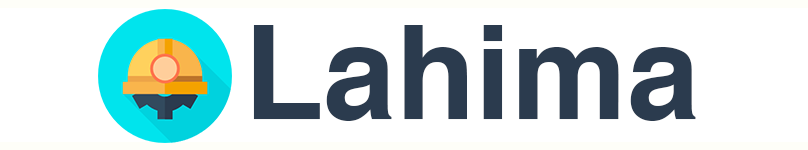
<style>
.page{position:relative;width:808px;height:150px;background:#ffffff}
.page>*{position:absolute;margin:0}
.t1{font:130px "Helvetica-Bold";color:#2b3b4e}
</style>
<div class="page">
<p class="t1" style="left:253px;top:25px;width:443px;height:96px">Lahima</p>
</div>
